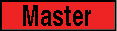
<style>
.page{position:relative;width:117px;height:31px;background:#ed2324}
.page>*{position:absolute;margin:0}
.t1{font:29.2px "Helvetica-Bold";color:#000000;scale:0.7 1}
</style>
<div class="page">
<p class="t1" style="left:23px;top:5px;width:68px;height:21px">Master</p>
</div>
